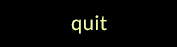
<style>
.page{position:relative;width:177px;height:47px;background:#000000}
.page>*{position:absolute;margin:0}
.t1{font:20px "Lato-Regular";letter-spacing:0.025em;color:#f4ffa8}
</style>
<div class="page">
<p class="t1" style="left:71px;top:15px;width:36px;height:19px">quit</p>
</div>
